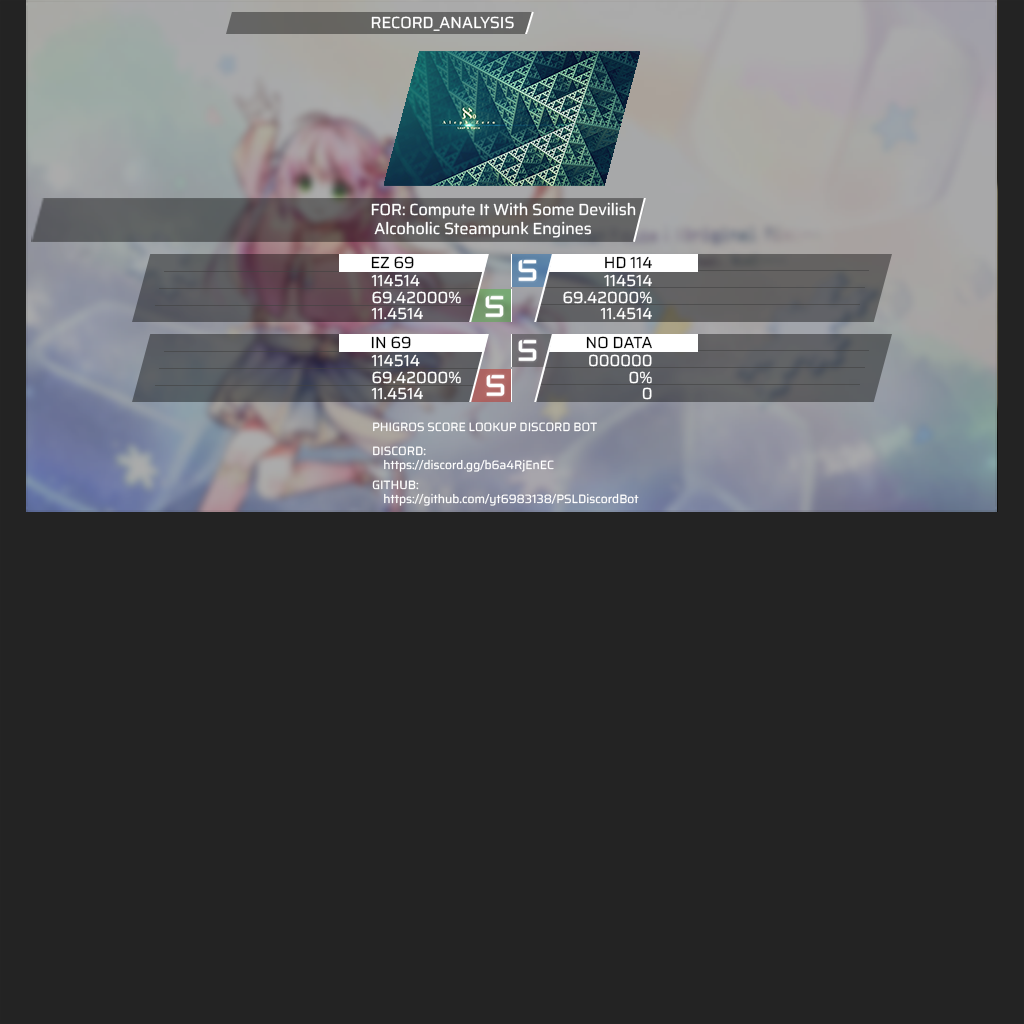
<style>
.page{position:relative;width:1024px;height:1024px;background:#232323}
.page>*{position:absolute;margin:0}
.t1{font:16px "Saira-Regular";color:#ffffff}
.t2{font:16px "Saira-Regular";color:#000000}
.t3{font:12px "Saira-Regular";color:#ffffff}
</style>
<div class="page">
<p class="t1" style="left:371px;top:16px;width:143px;height:15px">RECORD_ANALYSIS</p>
<p class="t1" style="left:371px;top:202px;width:265px;height:36px">FOR: Compute It With Some Devilish<br> Alcoholic Steampunk Engines</p>
<p class="t2" style="left:371px;top:256px;width:43px;height:13px">EZ 69</p>
<p class="t2" style="left:605px;top:256px;width:47px;height:13px">HD 114</p>
<p class="t1" style="left:371px;top:274px;width:49px;height:13px">114514</p>
<p class="t1" style="left:604px;top:274px;width:48px;height:13px">114514</p>
<p class="t1" style="left:372px;top:291px;width:89px;height:13px">69.42000%</p>
<p class="t1" style="left:563px;top:291px;width:89px;height:13px">69.42000%</p>
<p class="t1" style="left:371px;top:307px;width:52px;height:13px">11.4514</p>
<p class="t1" style="left:600px;top:307px;width:52px;height:13px">11.4514</p>
<p class="t2" style="left:371px;top:336px;width:40px;height:13px">IN 69</p>
<p class="t2" style="left:586px;top:336px;width:66px;height:13px">NO DATA</p>
<p class="t1" style="left:371px;top:354px;width:49px;height:13px">114514</p>
<p class="t1" style="left:589px;top:354px;width:63px;height:13px">000000</p>
<p class="t1" style="left:372px;top:371px;width:89px;height:13px">69.42000%</p>
<p class="t1" style="left:629px;top:371px;width:23px;height:13px">0%</p>
<p class="t1" style="left:371px;top:387px;width:52px;height:13px">11.4514</p>
<p class="t1" style="left:642px;top:387px;width:10px;height:13px">0</p>
<p class="t3" style="left:373px;top:422px;width:224px;height:10px">PHIGROS SCORE LOOKUP DISCORD BOT</p>
<p class="t3" style="left:373px;top:446px;width:181px;height:26px">DISCORD: <br>    https://discord.gg/b6a4RjEnEC</p>
<p class="t3" style="left:372px;top:480px;width:267px;height:26px">GITHUB: <br>    https://github.com/yt6983138/PSLDiscordBot</p>
</div>
